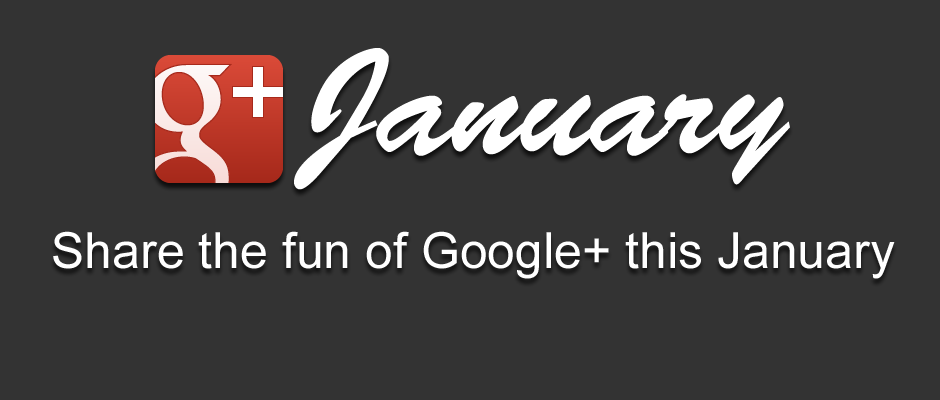
<style>
.page{position:relative;width:940px;height:400px;background:#333333}
.page>*{position:absolute;margin:0}
.t1{font:150px "BrushScriptStd";color:#ffffff}
.t2{font:50px "ArialMT";color:#ffffff}
</style>
<div class="page">
<p class="t1" style="left:294px;top:48px;width:496px;height:142px">January</p>
<p class="t2" style="left:53px;top:231px;width:842px;height:48px">Share the fun of Google+ this January</p>
</div>
